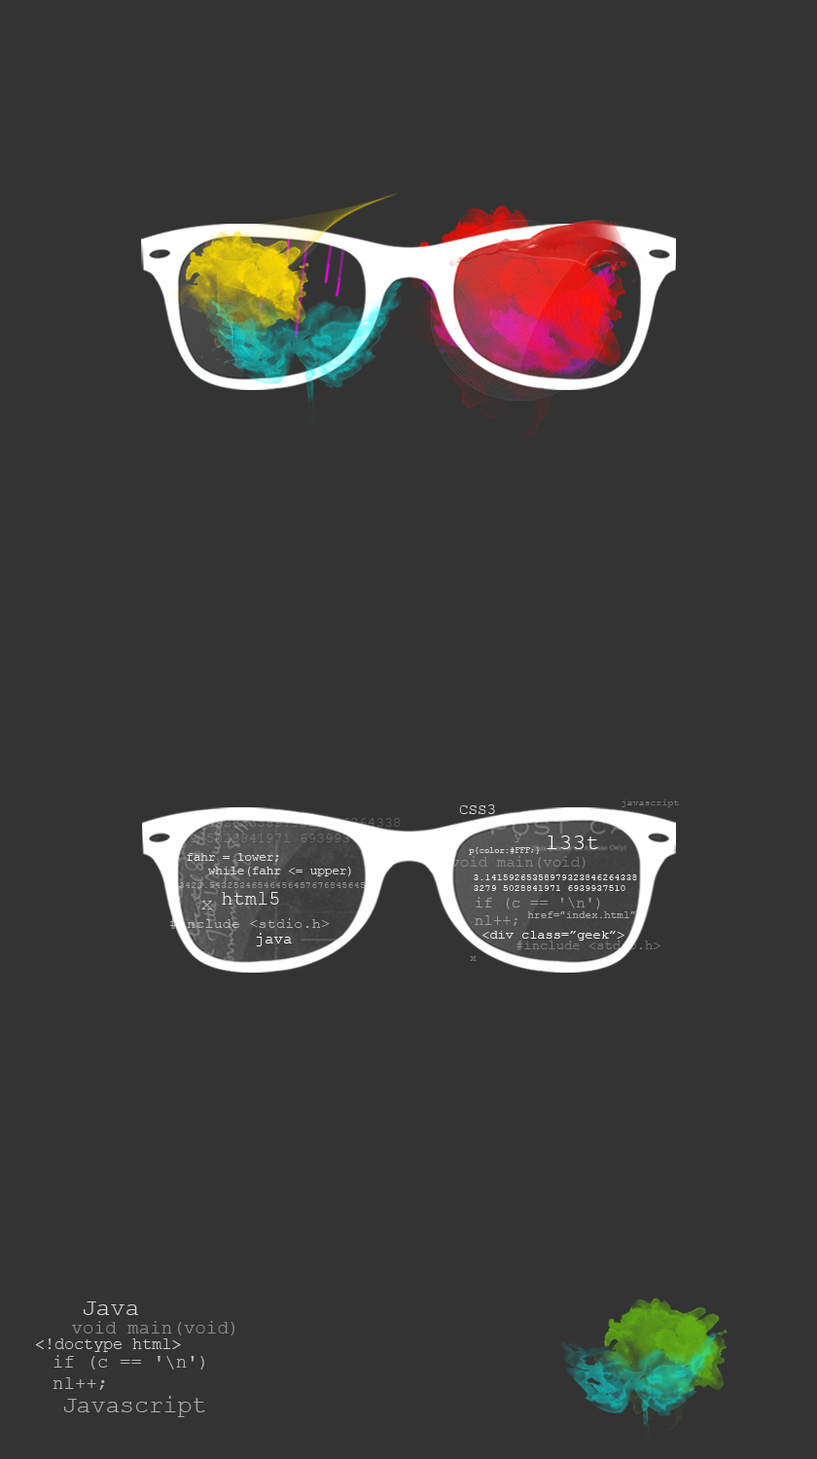
<style>
.page{position:relative;width:817px;height:1459px;background:#333333}
.page>*{position:absolute;margin:0}
.t1{font:15.3px "CourierNewPSMT";color:#d6d6d6}
.t2{font:9.4px "CourierNewPSMT";color:#717171;scale:1.03 1}
.t3{font:11.9px "CourierNewPSMT";color:#898989}
.t4{font:22.4px "CourierNewPSMT";color:#fefefe}
.t5{font:12px/13.8px "CourierNewPSMT";color:#dcdcdc}
.t6{font:15.3px "CourierNewPSMT";color:#878787}
.t7{font:8.4px "CourierNewPSMT";color:#d7d7d7}
.t8{font:9.6px/11.1px "CourierNewPSMT";color:#fefefe}
.t9{font:9.9px "CourierNewPSMT";color:#939393}
.t10{font:19.8px "CourierNewPSMT";color:#fefefe}
.t11{font:20.4px "CourierNewPSMT";color:#bbbbbb;scale:1.03 1}
.t12{font:15.3px/17.6px "CourierNewPSMT";color:#9e9e9e}
.t13{font:10.3px "CourierNewPSMT";color:#aaaaaa}
.t14{font:14.8px "CourierNewPSMT";color:#b9b9b9}
.t15{font:15.3px "CourierNewPSMT";color:#fefefe}
.t16{font:13px "CourierNewPSMT";color:#fefefe}
.t17{font:13.5px "CourierNewPSMT";color:#7c7c7c}
.t18{font:10.3px "CourierNewPSMT";color:#717171}
.t19{font:23.8px "CourierNewPSMT";color:#d6d6d6}
.t20{font:18.6px "CourierNewPSMT";color:#8f8f8f}
.t21{font:16.4px "CourierNewPSMT";color:#d2d2d2}
.t22{font:18.6px/21.5px "CourierNewPSMT";color:#b7b7b7}
.t23{font:23.8px "CourierNewPSMT";color:#adadad}
</style>
<div class="page">
<p class="t1" style="left:459px;top:805px;width:36px;height:9px">CSS3</p>
<p class="t2" style="left:622px;top:800px;width:57px;height:7px">javascript</p>
<p class="t3" style="left:515px;top:835px;width:6px;height:7px">y</p>
<p class="t4" style="left:547px;top:836px;width:51px;height:13px">l33t</p>
<p class="t5" style="left:187px;top:853px;width:164px;height:24px">fahr = lower;<br> while(fahr &lt;= upper)</p>
<p class="t6" style="left:450px;top:856px;width:136px;height:13px">void main(void)</p>
<p class="t7" style="left:469px;top:847px;width:70px;height:8px">p{color:#FFF;}</p>
<p class="t8" style="left:474px;top:875px;width:163px;height:16px;opacity:0.89">3.141592653589793238462643383279 5028841971 6939937510</p>
<p class="t9" style="left:173px;top:882px;width:199px;height:6px">23423.543253465464564576768456456456</p>
<p class="t10" style="left:222px;top:892px;width:57px;height:13px;opacity:0.9">html5</p>
<p class="t11" style="left:201px;top:901px;width:12px;height:9px">x</p>
<p class="t12" style="left:475px;top:897px;width:125px;height:29px">if (c == '\n')<br>nl++;</p>
<p class="t13" style="left:527px;top:912px;width:109px;height:6px">href=”index.html”</p>
<p class="t14" style="left:170px;top:918px;width:160px;height:11px">#include &lt;stdio.h&gt;</p>
<p class="t15" style="left:256px;top:933px;width:36px;height:14px">java</p>
<p class="t16" style="left:483px;top:931px;width:142px;height:10px;opacity:0.9">&lt;div class=”geek”&gt;</p>
<p class="t17" style="left:517px;top:941px;width:144px;height:9px">#include &lt;stdio.h&gt;</p>
<p class="t18" style="left:470px;top:956px;width:7px;height:5px">x</p>
<p class="t19" style="left:84px;top:1302px;width:54px;height:13px">Java</p>
<p class="t20" style="left:72px;top:1321px;width:162px;height:15px">void main(void)</p>
<p class="t21" style="left:35px;top:1339px;width:146px;height:13px">&lt;!doctype html&gt;</p>
<p class="t22" style="left:54px;top:1355px;width:150px;height:35px">if (c == '\n')<br>nl++;</p>
<p class="t23" style="left:64px;top:1396px;width:141px;height:21px">Javascript</p>
</div>
